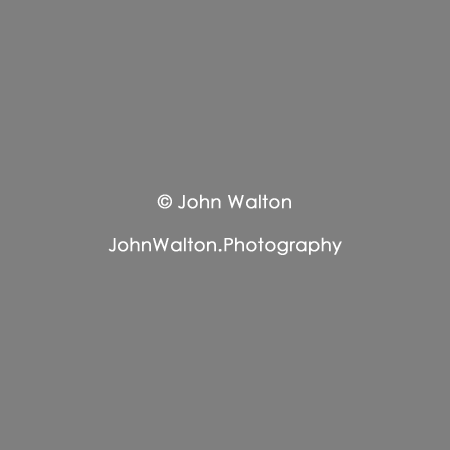
<style>
.page{position:relative;width:450px;height:450px;background:#7f7f7f}
.page>*{position:absolute;margin:0}
.t1{font:18px "CenturyGothic";color:#ffffff;font-weight:bold}
</style>
<div class="page">
<p class="t1" style="left:108px;top:194px;width:234px;height:61px;text-align:center">© John Walton<br><br>JohnWalton.Photography</p>
</div>
